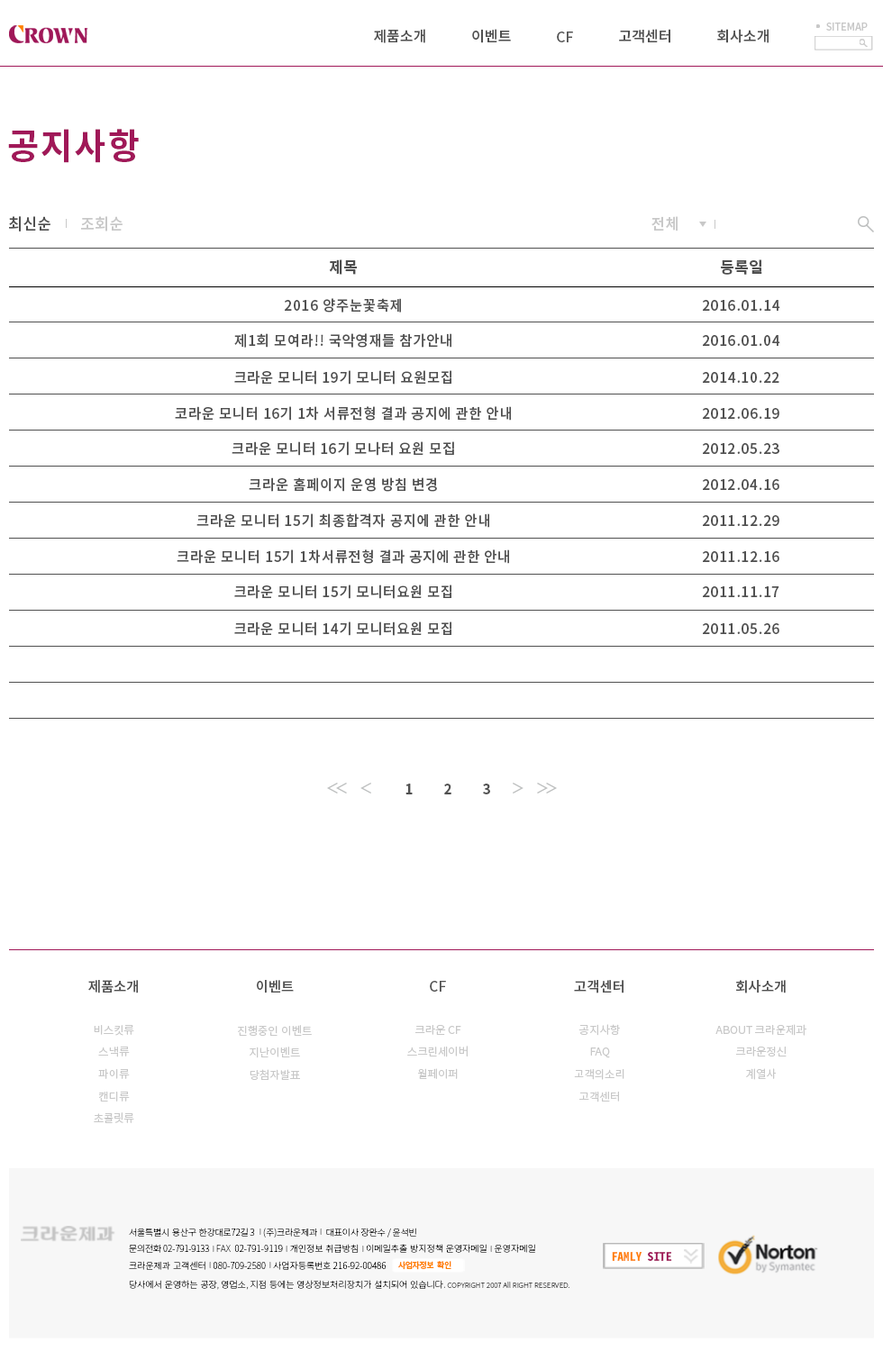
<style>
.page{position:relative;width:883px;height:1351px;background:#ffffff}
.page>*{position:absolute;margin:0}
.t1{font:14.4px "NotoSansCJKkr-Medium";color:#505050}
.t2{font:9.9px "NotoSansCJKkr-Medium";color:#c8c8c8}
.t3{font:36px "NotoSansCJKkr-Bold";letter-spacing:0.05em;color:#a01858;scale:0.96 1}
.t4{font:15.6px "NotoSansCJKkr-Medium";letter-spacing:0.05em;color:#505050;scale:0.96 1}
.t5{font:15.6px "NotoSansCJKkr-Medium";letter-spacing:0.05em;color:#c8c8c8;scale:0.96 1}
.t6{font:15.6px "NotoSansCJKkr-Bold";letter-spacing:0.05em;color:#505050;scale:0.96 1}
.t7{font:10.8px "NotoSansCJKkr-Medium";letter-spacing:0.05em;color:#505050;scale:0.96 1}
.t8{font:14.4px "NotoSansCJKkr-Bold";letter-spacing:0.05em;color:#505050;scale:0.96 1}
.t9{font:13.9px "NotoSansCJKkr-Medium";color:#505050}
.t10{font:11.1px "NotoSansCJKkr-DemiLight";color:#c8c8c8}
.t11{font:9px/18.7px "NotoSansCJKkr-Thin";color:#000000}
.t12{font:9px/16.9px "NotoSansCJKkr-Thin";letter-spacing:-0.02em;color:#000000}
.t13{font:6px/10.3px "AdobeMyungjoStd-Medium";color:#231f20}
.t14{font:9px/16.9px "NotoSansCJKkr-Thin";color:#000000}
.t15{font:7.3px/18.7px "NotoSansCJKkr-Thin";color:#000000}
.t16{font:12px "NotoSansMonoCJKkr-Bold";color:#ff7f00}
.t17{font:12px "NotoSansMonoCJKkr-Bold";color:#9f1758}
.t18{font:8.2px "NotoSansMonoCJKkr-Bold";letter-spacing:-0.06em;color:#ff7f00}
</style>
<div class="page">
<p class="t1" style="left:374px;top:29px;width:51px;height:14px">제품소개</p>
<p class="t1" style="left:472px;top:29px;width:39px;height:14px">이벤트</p>
<p class="t1" style="left:619px;top:29px;width:51px;height:14px">고객센터</p>
<p class="t1" style="left:717px;top:29px;width:51px;height:14px">회사소개</p>
<p class="t2" style="left:826px;top:23px;width:41px;height:8px">SITEMAP</p>
<p class="t1" style="left:557px;top:32px;width:16px;height:10px">CF</p>
<p class="t3" style="left:8px;top:129px;width:131px;height:34px">공지사항</p>
<p class="t4" style="left:9px;top:216px;width:41px;height:15px">최신순</p>
<p class="t5" style="left:81px;top:216px;width:41px;height:15px">조회순</p>
<p class="t5" style="left:651px;top:216px;width:26px;height:15px">전체</p>
<p class="t6" style="left:329px;top:259px;width:29px;height:16px">제목</p>
<p class="t6" style="left:721px;top:259px;width:41px;height:16px">등록일</p>
<p class="t7" style="left:285px;top:298px;width:116px;height:15px">2016 양주눈꽃축제</p>
<p class="t7" style="left:703px;top:300px;width:77px;height:11px">2016.01.14</p>
<p class="t7" style="left:234px;top:333px;width:217px;height:15px">제1회 모여라!! 국악영재들 참가안내</p>
<p class="t7" style="left:703px;top:335px;width:77px;height:11px">2016.01.04</p>
<p class="t7" style="left:234px;top:370px;width:217px;height:15px">크라운 모니터 19기 모니터 요원모집</p>
<p class="t7" style="left:703px;top:372px;width:76px;height:11px">2014.10.22</p>
<p class="t7" style="left:175px;top:406px;width:336px;height:15px">코라운 모니터 16기 1차 서류전형 결과 공지에 관한 안내</p>
<p class="t7" style="left:703px;top:408px;width:76px;height:11px">2012.06.19</p>
<p class="t7" style="left:231px;top:441px;width:223px;height:15px">크라운 모니터 16기 모나터 요원 모집</p>
<p class="t7" style="left:703px;top:443px;width:76px;height:11px">2012.05.23</p>
<p class="t7" style="left:249px;top:477px;width:188px;height:15px">크라운 홈페이지 운영 방침 변경</p>
<p class="t7" style="left:703px;top:479px;width:76px;height:11px">2012.04.16</p>
<p class="t7" style="left:196px;top:513px;width:293px;height:15px">크라운 모니터 15기 최종합격자 공지에 관한 안내</p>
<p class="t7" style="left:703px;top:515px;width:76px;height:11px">2011.12.29</p>
<p class="t7" style="left:177px;top:549px;width:332px;height:15px">크라운 모니터 15기 1차서류전형 결과 공지에 관한 안내</p>
<p class="t7" style="left:703px;top:551px;width:76px;height:11px">2011.12.16</p>
<p class="t7" style="left:234px;top:585px;width:217px;height:14px">크라운 모니터 15기 모니터요원 모집</p>
<p class="t7" style="left:703px;top:586px;width:76px;height:11px">2011.11.17</p>
<p class="t7" style="left:234px;top:621px;width:217px;height:15px">크라운 모니터 14기 모니터요원 모집</p>
<p class="t7" style="left:703px;top:623px;width:76px;height:11px">2011.05.26</p>
<p class="t8" style="left:405px;top:784px;width:7px;height:10px">1</p>
<p class="t8" style="left:444px;top:784px;width:7px;height:10px">2</p>
<p class="t8" style="left:483px;top:784px;width:7px;height:10px">3</p>
<p class="t9" style="left:88px;top:980px;width:50px;height:13px">제품소개</p>
<p class="t9" style="left:257px;top:980px;width:37px;height:13px">이벤트</p>
<p class="t9" style="left:430px;top:981px;width:16px;height:11px">CF</p>
<p class="t9" style="left:574px;top:980px;width:49px;height:13px">고객센터</p>
<p class="t9" style="left:736px;top:980px;width:49px;height:13px">회사소개</p>
<p class="t10" style="left:94px;top:1025px;width:40px;height:11px">비스킷류</p>
<p class="t10" style="left:238px;top:1025px;width:74px;height:11px">진행중인 이벤트</p>
<p class="t10" style="left:415px;top:1025px;width:46px;height:10px">크라운 CF</p>
<p class="t10" style="left:578px;top:1024px;width:42px;height:12px">공지사항</p>
<p class="t10" style="left:715px;top:1024px;width:91px;height:12px">ABOUT 크라운제과</p>
<p class="t10" style="left:98px;top:1047px;width:32px;height:10px">스낵류</p>
<p class="t10" style="left:249px;top:1047px;width:51px;height:11px">지난이벤트</p>
<p class="t10" style="left:407px;top:1046px;width:60px;height:11px">스크린세이버</p>
<p class="t10" style="left:590px;top:1047px;width:20px;height:11px">FAQ</p>
<p class="t10" style="left:736px;top:1047px;width:50px;height:9px">크라운정신</p>
<p class="t10" style="left:98px;top:1068px;width:32px;height:11px">파이류</p>
<p class="t10" style="left:249px;top:1069px;width:51px;height:11px">당첨자발표</p>
<p class="t10" style="left:418px;top:1068px;width:40px;height:11px">월페이퍼</p>
<p class="t10" style="left:574px;top:1069px;width:50px;height:11px">고객의소리</p>
<p class="t10" style="left:746px;top:1068px;width:29px;height:12px">계열사</p>
<p class="t10" style="left:98px;top:1092px;width:32px;height:10px">캔디류</p>
<p class="t10" style="left:579px;top:1092px;width:40px;height:10px">고객센터</p>
<p class="t10" style="left:94px;top:1112px;width:40px;height:11px">초콜릿류</p>
<p class="t11" style="left:129px;top:1228px;width:440px;height:62px"><span class="t12">서울특별시 용산구 한강대로72길 3  </span><span class="t13">│</span><span class="t12">(주)크라운제과 </span><span class="t13">│</span><span class="t12"> 대표이사 장완수 / 윤석빈<br>문의전화 02-791-9133 </span><span class="t13">│</span><span class="t14">FAX  02-791-9119 </span><span class="t13">│</span><span class="t14">개인정보 취급방침 </span><span class="t13">│</span><span class="t14">이메일추출 방지정책 운영자메일 </span><span class="t13">│</span><span class="t14">운영자메일<br>크라운제과 고객센터 </span><span class="t13">│</span><span class="t14">080-709-2580 </span><span class="t13">│</span><span class="t14">사업자등록번호 216-92-00486<br></span>당사에서 운영하는 공장, 영업소, 지점 등에는 영상정보처리장치가 설치되어 있습니다. <span class="t15">COPYRIGHT 2007 All RIGHT RESERVED.</span></p>
<p class="t16" style="left:612px;top:1252px;width:60px;height:9px">FAMLY <span class="t17">SITE</span></p>
<p class="t18" style="left:398px;top:1261px;width:53px;height:9px">사업자정보 확인</p>
</div>
